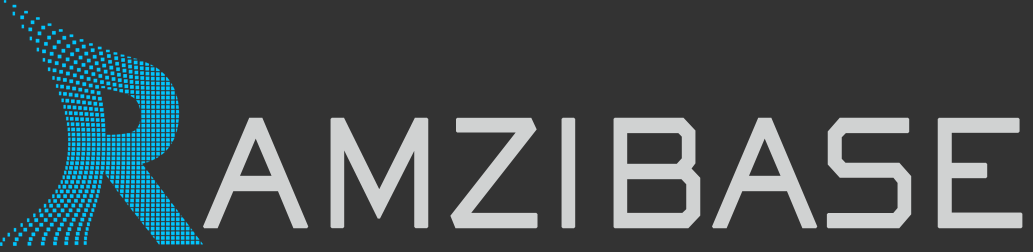
<style>
.page{position:relative;width:1033px;height:252px;background:#333333}
.page>*{position:absolute;margin:0}
.t1{font:144.7px "SackersGothicStd-Square";color:#d0d2d2;font-weight:bold;scale:0.89 1}
</style>
<div class="page">
<p class="t1" style="left:203px;top:117px;width:820px;height:112px">AMZIBASE</p>
</div>
